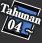
<style>
.page{position:relative;width:42px;height:43px;background:#333333}
.page>*{position:absolute;margin:0}
.t1{font:11px/14px "RyuminPro-ExBold";letter-spacing:-0.08em;color:#ffffff;font-weight:bold}
.t2{font:13px/14px "RyuminPro-ExBold";color:#ffffff;font-weight:bold}
.t3{font:13px/14px "WineArial";color:#ffffff;font-weight:bold}
</style>
<div class="page">
<p class="t1" style="left:0px;top:3px;width:41px;height:30px;text-align:center;rotate:19deg">Tahunan<br><span class="t2">  04 </span><span class="t3">~</span></p>
</div>
